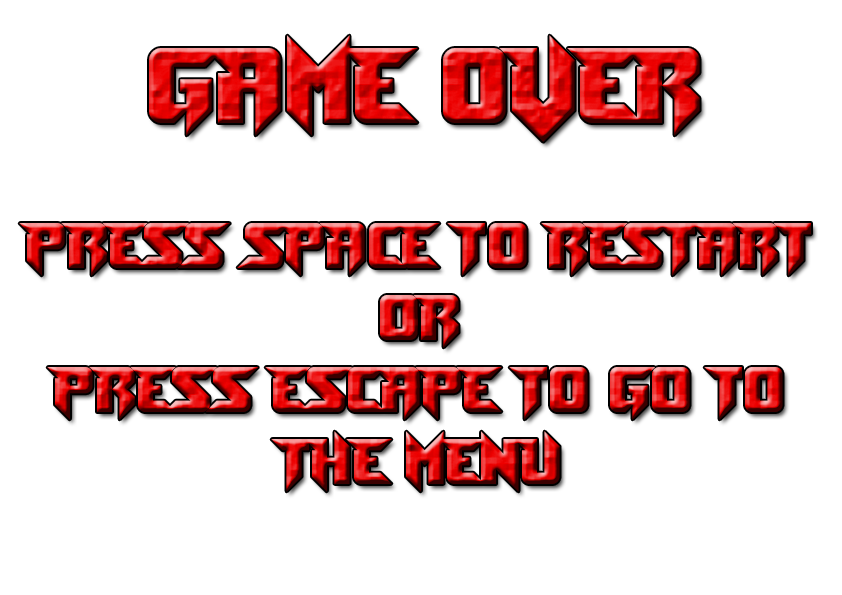
<style>
.page{position:relative;width:842px;height:595px;background:#ffffff}
.page>*{position:absolute;margin:0}
.t1{font:100px "Toe-the-Lineless"}
.t2{font:60px "Toe-the-Lineless"}
</style>
<div class="page">
<p class="t1" style="left:149px;top:35px;width:551px;height:107px">GAME OVER</p>
<p class="t2" style="left:19px;top:223px;width:792px;height:269px;text-align:center">PRESS SPACE TO RESTART<br>OR<br>PRESS ESCAPE TO GO TO THE MENU</p>
</div>
